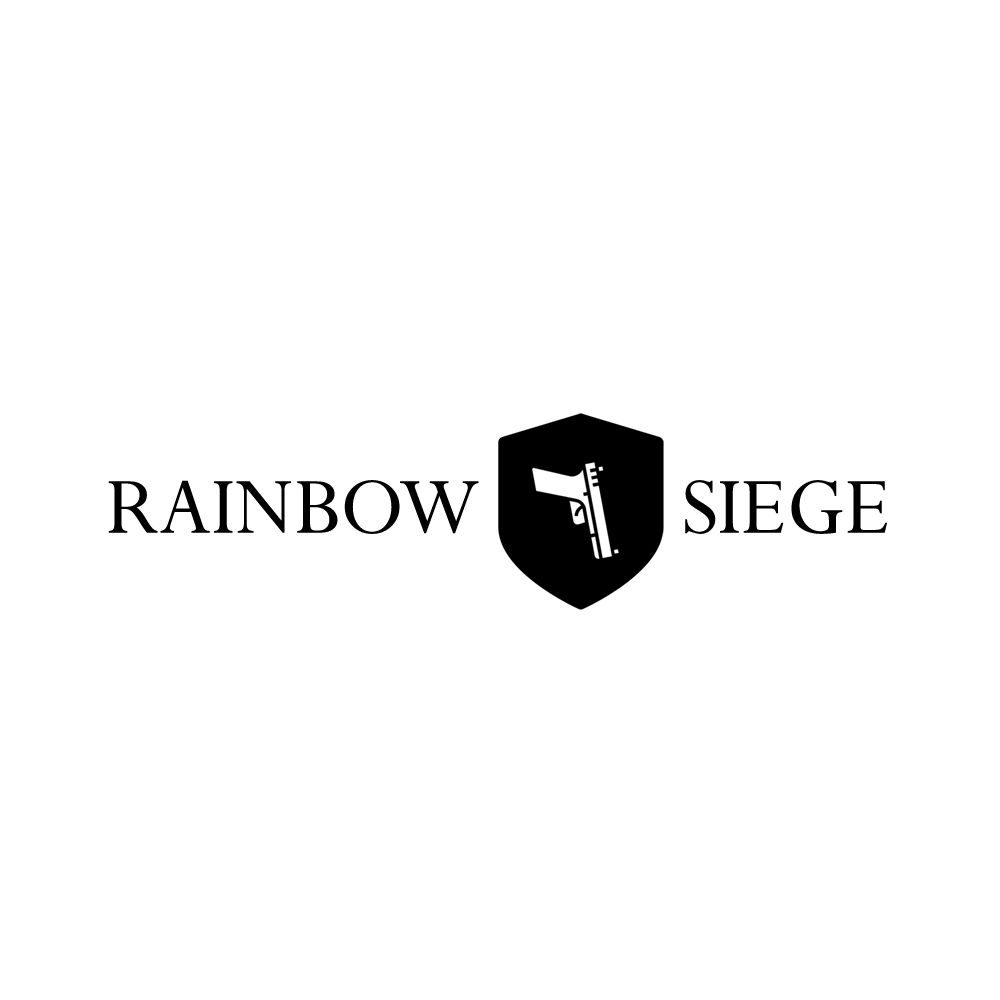
<style>
.page{position:relative;width:1000px;height:1000px;background:#ffffff}
.page>*{position:absolute;margin:0}
.t1{font:89.1px "Perpetua";color:#000000}
</style>
<div class="page">
<p class="t1" style="left:108px;top:480px;width:779px;height:54px">RAINBOW          SIEGE</p>
</div>
